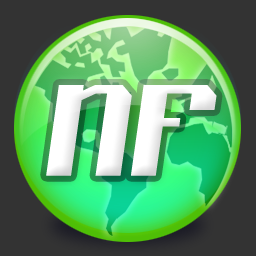
<style>
.page{position:relative;width:256px;height:256px;background:#333333}
.page>*{position:absolute;margin:0}
.t1{font:125px "NominalBRK";color:#ffffff}
</style>
<div class="page">
<p class="t1" style="left:46px;top:85px;width:171px;height:91px">NF</p>
</div>
